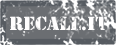
<style>
.page{position:relative;width:116px;height:45px;background:#6b6e72}
.page>*{position:absolute;margin:0}
.t1{font:20.1px "Stencil";color:#fffefe}
</style>
<div class="page">
<p class="t1" style="left:10px;top:16px;width:97px;height:15px">RECALL.IT</p>
</div>
